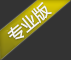
<style>
.page{position:relative;width:71px;height:60px;background:#333333}
.page>*{position:absolute;margin:0}
.t1{font:16px "MicrosoftYaHei";letter-spacing:0.01em;color:#f5f5f5}
</style>
<div class="page">
<p class="t1" style="left:7px;top:2px;width:45px;height:38px;rotate:-40deg">专业版</p>
</div>
